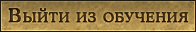
<style>
.page{position:relative;width:196px;height:32px}
.page>*{position:absolute;margin:0}
.t1{font:19.4px "CooperMediumCBT";letter-spacing:0.04em;color:#332612;font-variant:small-caps;font-weight:bold}
</style>
<div class="page">
<p class="t1" style="left:8px;top:8px;width:181px;height:15px">Выйти из обучения</p>
</div>
